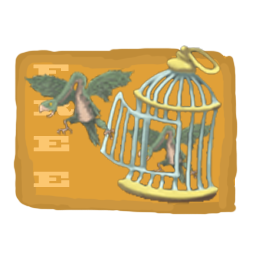
<style>
.page{position:relative;width:256px;height:256px;background:#ffffff}
.page>*{position:absolute;margin:0}
.t1{font:20.4px "BlackoakStd";color:#fcc770}
</style>
<div class="page">
<p class="t1" style="left:33px;top:64px;width:41px;height:123px">F<br>R<br>E<br>E</p>
</div>
